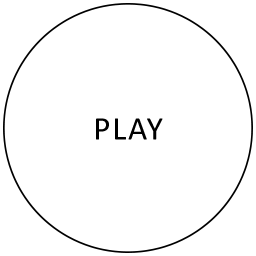
<style>
.page{position:relative;width:256px;height:256px;background:#ffffff}
.page>*{position:absolute;margin:0}
.t1{font:33.3px "Calibri";letter-spacing:0.05em;color:#000000}
</style>
<div class="page">
<p class="t1" style="left:96px;top:118px;width:67px;height:22px">PLAY</p>
</div>
